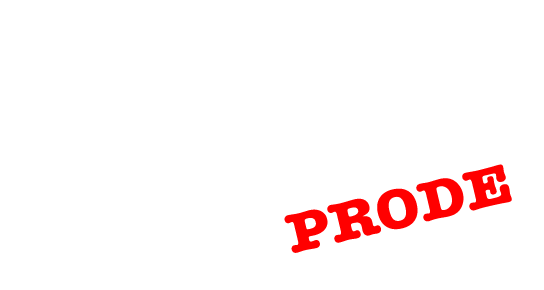
<style>
.page{position:relative;width:544px;height:290px;background:#ffffff}
.page>*{position:absolute;margin:0}
.t1{font:57.1px "AmericanTypewriter-Bold";color:#ff0000;scale:1.11 1}
</style>
<div class="page">
<p class="t1" style="left:284px;top:164px;width:228px;height:89px;rotate:-13deg">PRODE</p>
</div>
